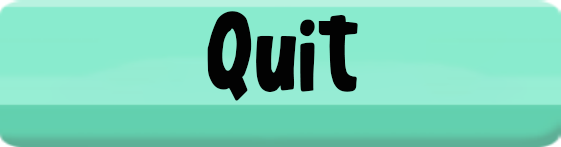
<style>
.page{position:relative;width:561px;height:147px;background:#89ebce}
.page>*{position:absolute;margin:0}
.t1{font:104.2px "LuTunaFREE";color:#020202}
</style>
<div class="page">
<p class="t1" style="left:207px;top:11px;width:151px;height:90px">Quit</p>
</div>
